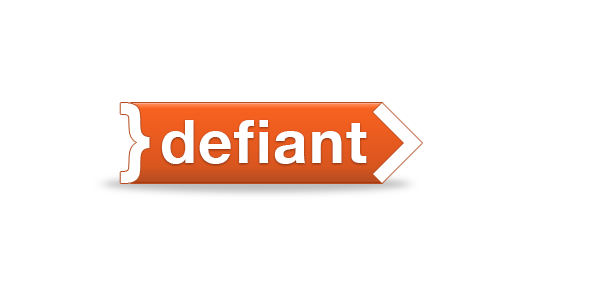
<style>
.page{position:relative;width:600px;height:300px;background:#ffffff}
.page>*{position:absolute;margin:0}
.t1{font:60px "HelveticaNeue-Bold";letter-spacing:0.028em;color:#ffffff}
</style>
<div class="page">
<p class="t1" style="left:161px;top:120px;width:206px;height:44px">defiant</p>
<p class="t1" style="left:162px;top:119px;width:206px;height:44px">defiant</p>
</div>
